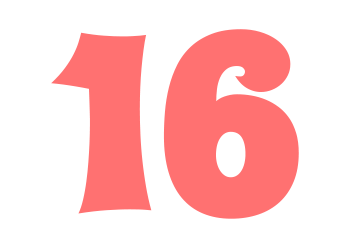
<style>
.page{position:relative;width:354px;height:236px;background:#ffffff}
.page>*{position:absolute;margin:0}
.t1{font:250px "SpicyRice-Regular";color:#ff7171}
</style>
<div class="page">
<p class="t1" style="left:51px;top:29px;width:248px;height:190px">16</p>
</div>
